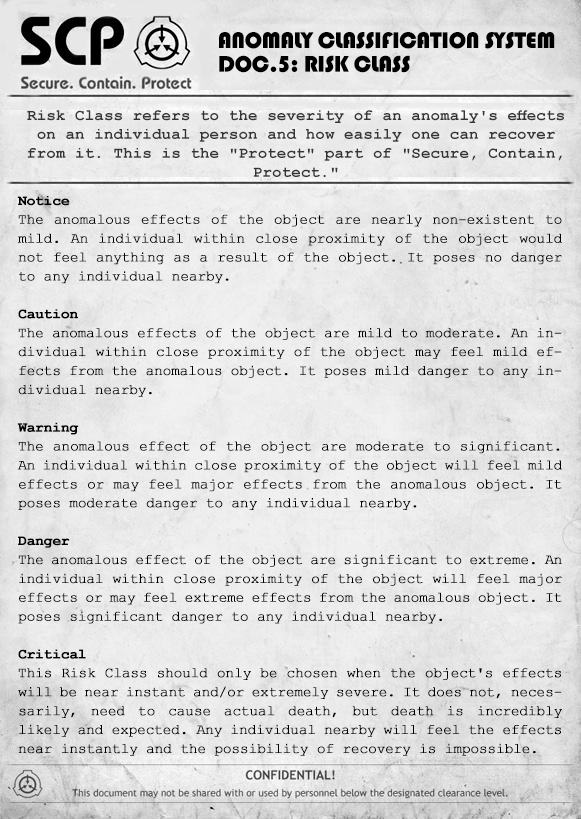
<style>
.page{position:relative;width:581px;height:819px}
.page>*{position:absolute;margin:0}
.t1{font:23.6px/23.6px "Bauhaus93";letter-spacing:-0.025em;color:#000000;text-transform:uppercase}
.t2{font:15.7px "CourierNewPS-BoldMT";letter-spacing:0.01em;color:#343434}
.t3{font:14.2px/18.9px "CourierNewPSMT";letter-spacing:-0.025em;color:#000000;font-weight:bold}
.t4{font:14.2px/18.9px "CourierNewPS-BoldMT";letter-spacing:-0.025em;color:#000000;font-weight:bold}
</style>
<div class="page">
<p class="t1" style="left:219px;top:32px;width:336px;height:41px">Anomaly Classification System<br>Doc.5: Risk Class</p>
<p class="t2" style="left:27px;top:110px;width:537px;height:67px;text-align:center">Risk Class refers to the severity of an anomaly's effects on an individual person and how easily one can recover from it. This is the "Protect" part of "Secure, Contain, Protect."</p>
<p class="t3" style="left:17px;top:196px;width:545px;height:560px;text-align:justify"><span class="t4">Notice<br></span>The anomalous effects of the object are nearly non-existent to mild. An individual within close proximity of the object would not feel anything as a result of the object. It poses no danger to any individual nearby.<br><br><span class="t4">Caution<br></span>The anomalous effects of the object are mild to moderate. An individual within close proximity of the object may feel mild effects from the anomalous object. It poses mild danger to any individual nearby.<br><br><span class="t4">Warning<br></span>The anomalous effect of the object are moderate to significant. An individual within close proximity of the object will feel mild effects or may feel major effects from the anomalous object. It poses moderate danger to any individual nearby.<br><br><span class="t4">Danger<br></span>The anomalous effect of the object are significant to extreme. An individual within close proximity of the object will feel major effects or may feel extreme effects from the anomalous object. It poses significant danger to any individual nearby.<br><br><span class="t4">Critical<br></span>This Risk Class should only be chosen when the object's effects will be near instant and/or extremely severe. It does not, necessarily, need to cause actual death, but death is incredibly likely and expected. Any individual nearby will feel the effects near instantly and the possibility of recovery is impossible.</p>
</div>
